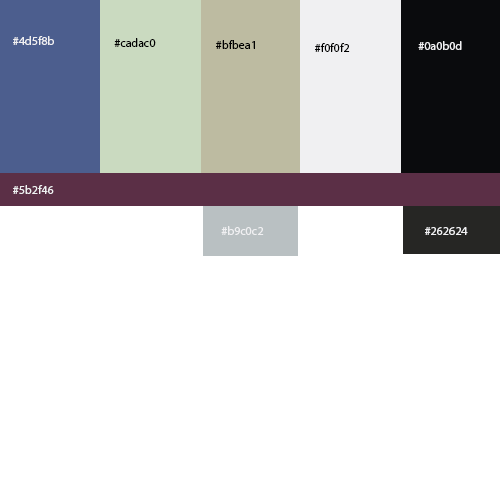
<style>
.page{position:relative;width:500px;height:500px;background:#ffffff}
.page>*{position:absolute;margin:0}
.t1{font:12px "MyriadPro-Regular";color:#f0f0f2}
.t2{font:12px "MyriadPro-Regular";color:#000000}
</style>
<div class="page">
<p class="t1" style="left:13px;top:36px;width:41px;height:9px">#4d5f8b</p>
<p class="t2" style="left:114px;top:38px;width:42px;height:9px">#cadac0</p>
<p class="t2" style="left:216px;top:40px;width:39px;height:9px">#bfbea1</p>
<p class="t1" style="left:418px;top:41px;width:44px;height:9px">#0a0b0d</p>
<p class="t2" style="left:315px;top:43px;width:35px;height:9px">#f0f0f2</p>
<p class="t1" style="left:13px;top:185px;width:41px;height:9px">#5b2f46</p>
<p class="t1" style="left:221px;top:226px;width:43px;height:9px">#b9c0c2</p>
<p class="t1" style="left:425px;top:227px;width:43px;height:8px">#262624</p>
</div>
